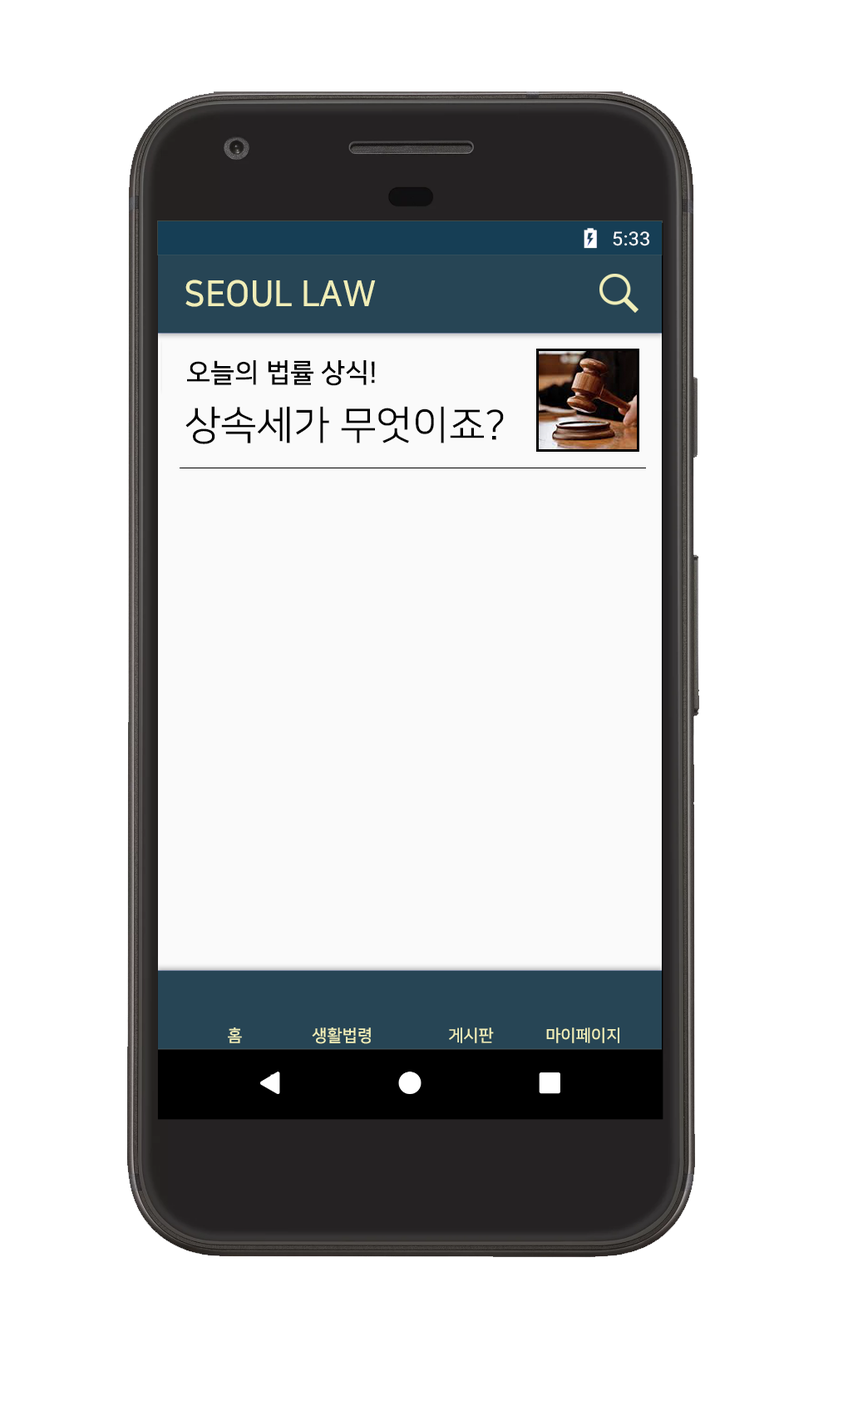
<style>
.page{position:relative;width:848px;height:1406px;background:#ffffff}
.page>*{position:absolute;margin:0}
.t1{font:35.9px "NanumSquareOTFB";color:#f0eeb8;scale:0.96 1}
.t2{font:26.6px "NanumSquareOTFB";color:#000000}
.t3{font:39.9px "NanumSquareOTFR";color:#000000}
.t4{font:16.6px "NanumSquareOTFB";color:#f0eeb8}
</style>
<div class="page">
<p class="t1" style="left:185px;top:279px;width:191px;height:28px">SEOUL LAW</p>
<p class="t2" style="left:187px;top:360px;width:188px;height:26px">오늘의 법률 상식!</p>
<p class="t3" style="left:185px;top:406px;width:319px;height:38px">상속세가 무엇이죠?</p>
<p class="t4" style="left:228px;top:1027px;width:14px;height:16px">홈</p>
<p class="t4" style="left:312px;top:1027px;width:59px;height:17px">생활법령</p>
<p class="t4" style="left:449px;top:1027px;width:45px;height:16px">게시판</p>
<p class="t4" style="left:546px;top:1027px;width:74px;height:16px">마이페이지</p>
</div>
